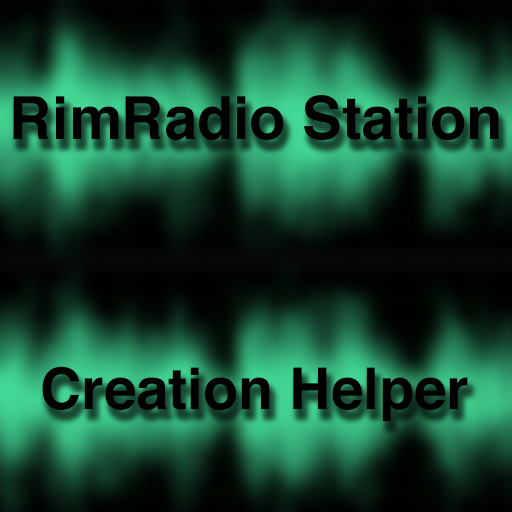
<style>
.page{position:relative;width:512px;height:512px}
.page>*{position:absolute;margin:0}
.t1{font:59.2px "Helvetica-Bold";color:#000000}
.t2{font:57.5px "Helvetica-Bold";color:#000000}
</style>
<div class="page">
<p class="t1" style="left:13px;top:95px;width:486px;height:45px">RimRadio Station</p>
<p class="t2" style="left:42px;top:366px;width:426px;height:55px">Creation Helper</p>
</div>
